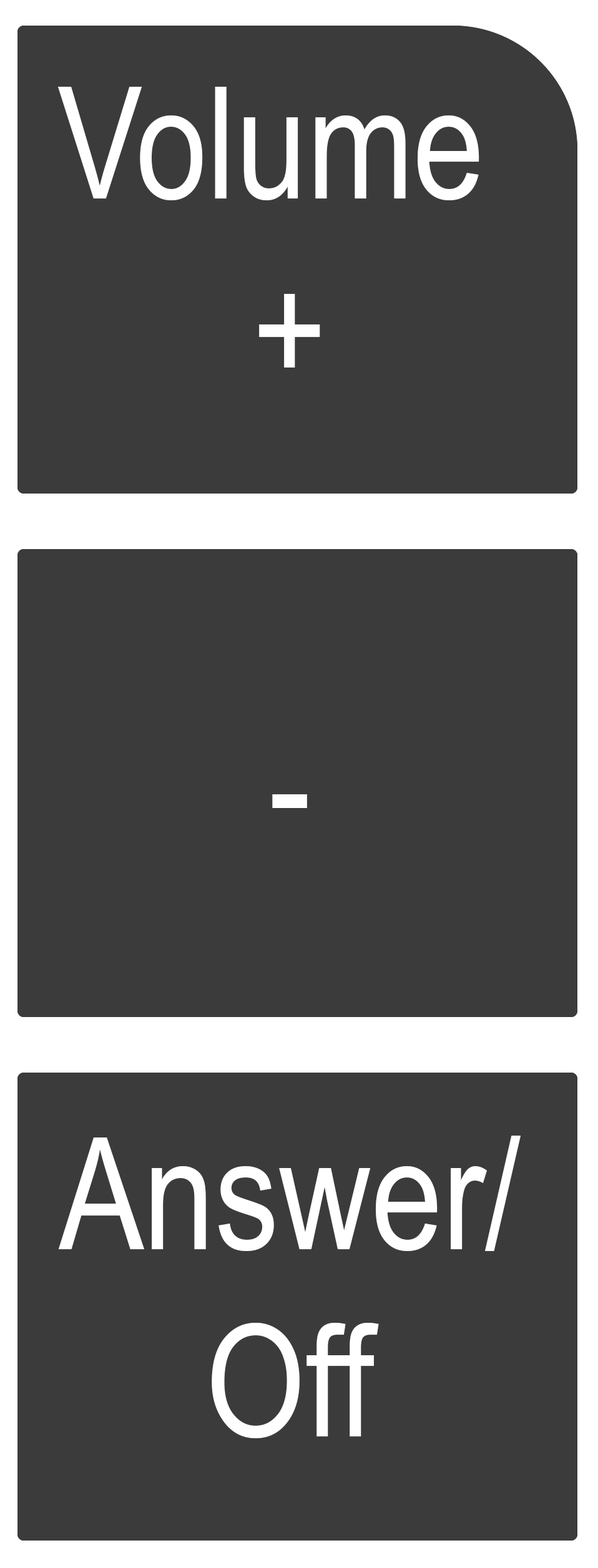
<style>
.page{position:relative;width:598px;height:1568px;background:#3b3b3b}
.page>*{position:absolute;margin:0}
.t1{font:156px "ArialNarrow";color:#ffffff}
</style>
<div class="page">
<p class="t1" style="left:57px;top:87px;width:422px;height:281px">Volume<br>+<br><br>+</p>
<p class="t1" style="left:272px;top:794px;width:35px;height:14px">-</p>
<p class="t1" style="left:58px;top:1136px;width:462px;height:302px;text-align:center">Answer/<br>Off</p>
</div>
